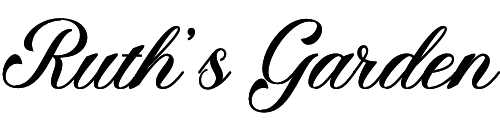
<style>
.page{position:relative;width:500px;height:128px;background:#ffffff}
.page>*{position:absolute;margin:0}
.t1{font:76.4px "AngeltaScript";color:#000000}
</style>
<div class="page">
<p class="t1" style="left:2px;top:18px;width:499px;height:95px">Ruth’s Garden</p>
</div>
